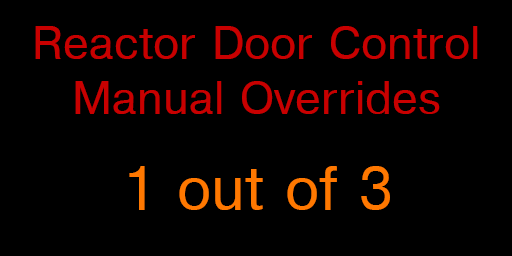
<style>
.page{position:relative;width:512px;height:256px;background:#000000}
.page>*{position:absolute;margin:0}
.t1{font:46px "Helvetica";color:#c80000}
.t2{font:60px "Helvetica";color:#ff7800}
</style>
<div class="page">
<p class="t1" style="left:35px;top:26px;width:443px;height:88px;text-align:center">Reactor Door Control<br>Manual Overrides</p>
<p class="t2" style="left:129px;top:166px;width:261px;height:44px">1 out of 3</p>
</div>
